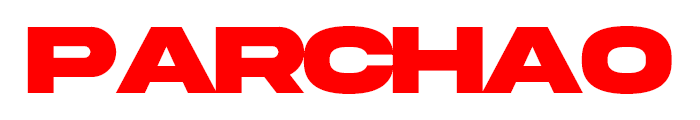
<style>
.page{position:relative;width:700px;height:120px;background:#ffffff}
.page>*{position:absolute;margin:0}
.t1{font:100px "AkiraExpanded-SuperBold";letter-spacing:-0.025em;color:#ff0000}
</style>
<div class="page">
<p class="t1" style="left:27px;top:26px;width:645px;height:68px">Parchao</p>
</div>
